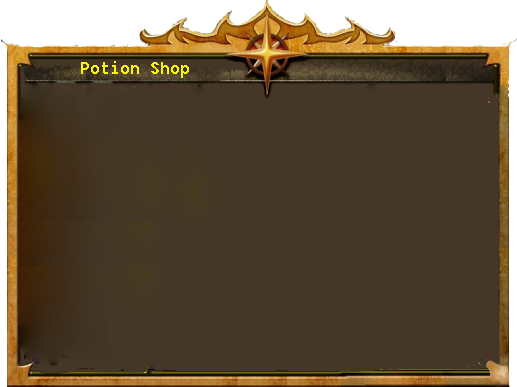
<style>
.page{position:relative;width:517px;height:387px;background:#443727}
.page>*{position:absolute;margin:0}
.t1{font:18px "Fixedsys";color:#f8f602}
</style>
<div class="page">
<p class="t1" style="left:81px;top:61px;width:108px;height:17px">Potion Shop</p>
</div>
